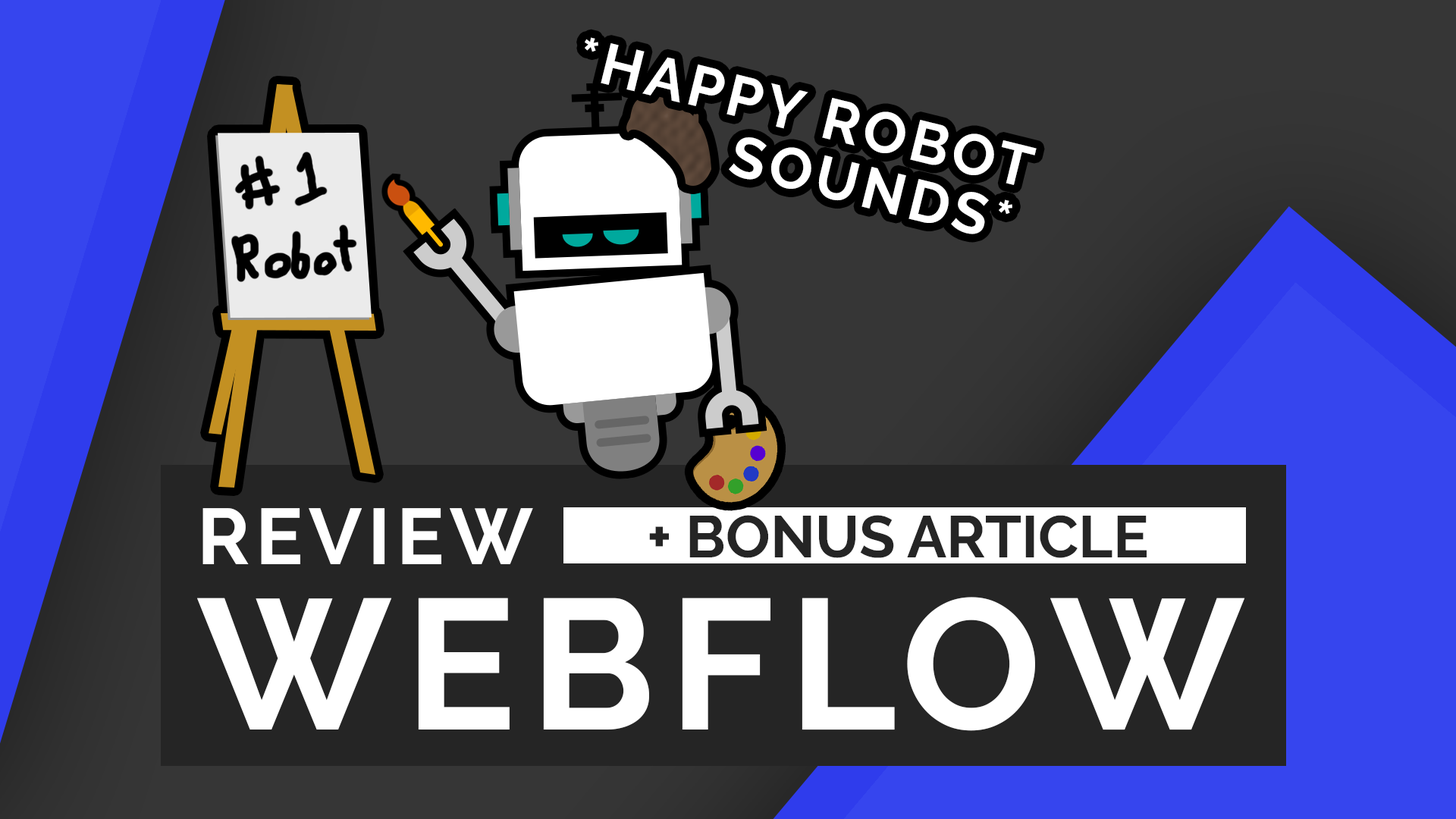
<style>
.page{position:relative;width:1456px;height:819px;background:#363636}
.page>*{position:absolute;margin:0}
.t1{font:57.6px/57.6px "Raleway-Bold";letter-spacing:0.075em;color:#ffffff;text-transform:uppercase}
.t2{font:78.9px "Raleway-Bold";letter-spacing:0.075em;color:#ffffff;text-transform:uppercase}
.t3{font:58.9px "Raleway-Bold";color:#252525;text-transform:uppercase}
.t4{font:184.7px "Raleway-Bold";letter-spacing:0.075em;color:#ffffff;text-transform:uppercase}
</style>
<div class="page">
<p class="t1" style="left:585px;top:37px;width:452px;height:197px;rotate:14deg">*Happy robot<br>    sounds*</p>
<p class="t2" style="left:202px;top:508px;width:331px;height:56px">Review</p>
<p class="t3" style="left:649px;top:515px;width:498px;height:43px">+ Bonus article</p>
<p class="t4" style="left:197px;top:597px;width:1048px;height:134px">WebFlow</p>
</div>
